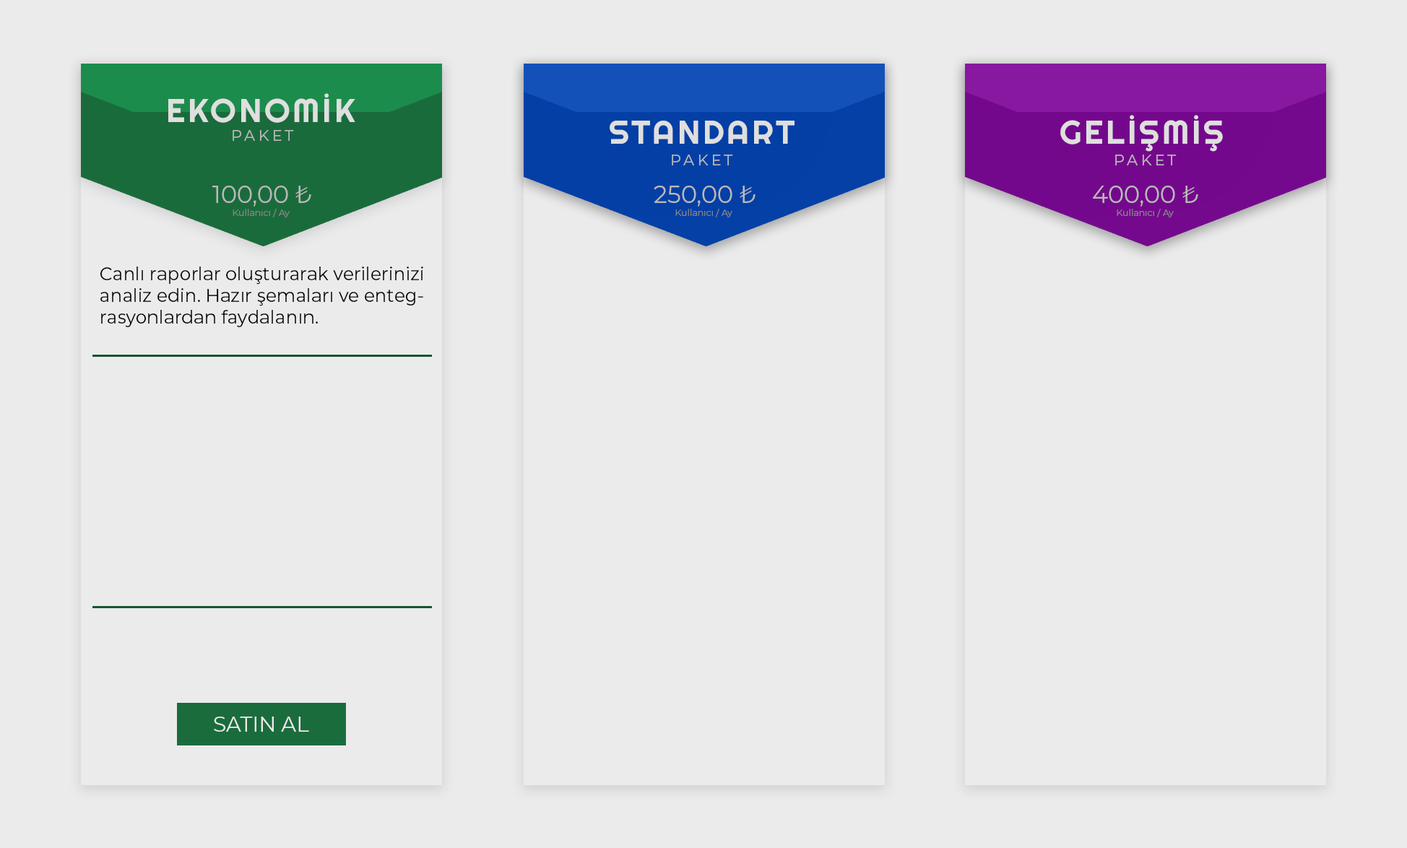
<style>
.page{position:relative;width:1407px;height:848px;background:#ebebeb}
.page>*{position:absolute;margin:0}
.t1{font:33.1px "Righteous-Regular";letter-spacing:0.08em;color:#dfdfdf;text-transform:uppercase}
.t2{font:15px "Montserrat-Regular";letter-spacing:0.2em;color:#b9b9b9}
.t3{font:24.1px "Montserrat-Regular";color:#b9b9b9;text-transform:uppercase}
.t4{font:9px "Montserrat-Regular";color:#858585}
.t5{font:18.1px "Montserrat-Regular";color:#020202}
.t6{font:21.1px "Montserrat-Regular";color:#ebebeb;text-transform:uppercase}
</style>
<div class="page">
<p class="t1" style="left:168px;top:93px;width:187px;height:30px">Ekonomİk</p>
<p class="t1" style="left:609px;top:121px;width:185px;height:23px">STANDART</p>
<p class="t1" style="left:1060px;top:115px;width:162px;height:37px">GELİŞMİŞ</p>
<p class="t2" style="left:233px;top:130px;width:61px;height:11px">PAKET</p>
<p class="t2" style="left:672px;top:155px;width:61px;height:10px">PAKET</p>
<p class="t2" style="left:1115px;top:155px;width:61px;height:10px">PAKET</p>
<p class="t3" style="left:212px;top:186px;width:99px;height:21px">100,00 ₺</p>
<p class="t3" style="left:653px;top:186px;width:102px;height:21px">250,00 ₺</p>
<p class="t3" style="left:1093px;top:186px;width:105px;height:21px">400,00 ₺</p>
<p class="t4" style="left:233px;top:209px;width:57px;height:8px">Kullanıcı / Ay</p>
<p class="t4" style="left:675px;top:209px;width:57px;height:8px">Kullanıcı / Ay</p>
<p class="t4" style="left:1116px;top:209px;width:57px;height:8px">Kullanıcı / Ay</p>
<p class="t5" style="left:100px;top:266px;width:323px;height:61px">Canlı raporlar oluşturarak verilerinizi<br>analiz edin. Hazır şemaları ve enteg-<br>rasyonlardan faydalanın.</p>
<p class="t6" style="left:214px;top:716px;width:95px;height:15px">Satın Al</p>
</div>
